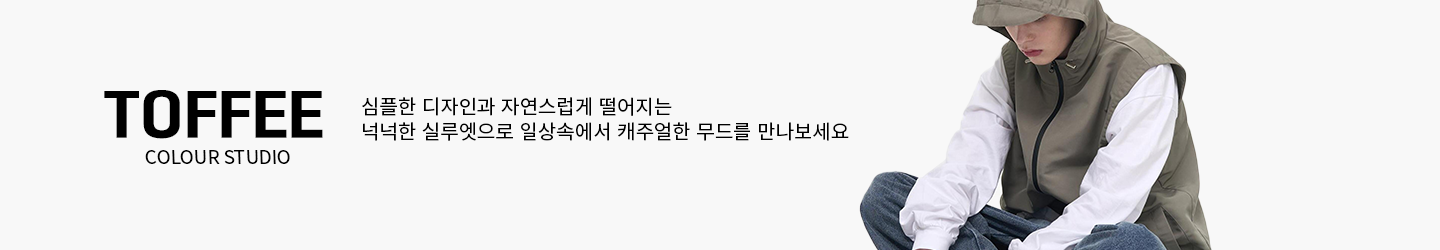
<style>
.page{position:relative;width:1440px;height:250px;background:#f8f8f8}
.page>*{position:absolute;margin:0}
.t1{font:60px "MBC-1961M";color:#000000}
.t2{font:20px/25px "NotoSansKR-Regular";color:#000000}
.t3{font:18px "NotoSansKR-Regular";color:#000000;scale:1.04 1}
</style>
<div class="page">
<p class="t1" style="left:104px;top:90px;width:219px;height:49px">TOFFEE</p>
<p class="t2" style="left:362px;top:97px;width:487px;height:44px">심플한 디자인과 자연스럽게 떨어지는 <br>넉넉한 실루엣으로 일상속에서 캐주얼한 무드를 만나보세요</p>
<p class="t3" style="left:145px;top:150px;width:145px;height:14px">COLOUR STUDIO</p>
</div>
